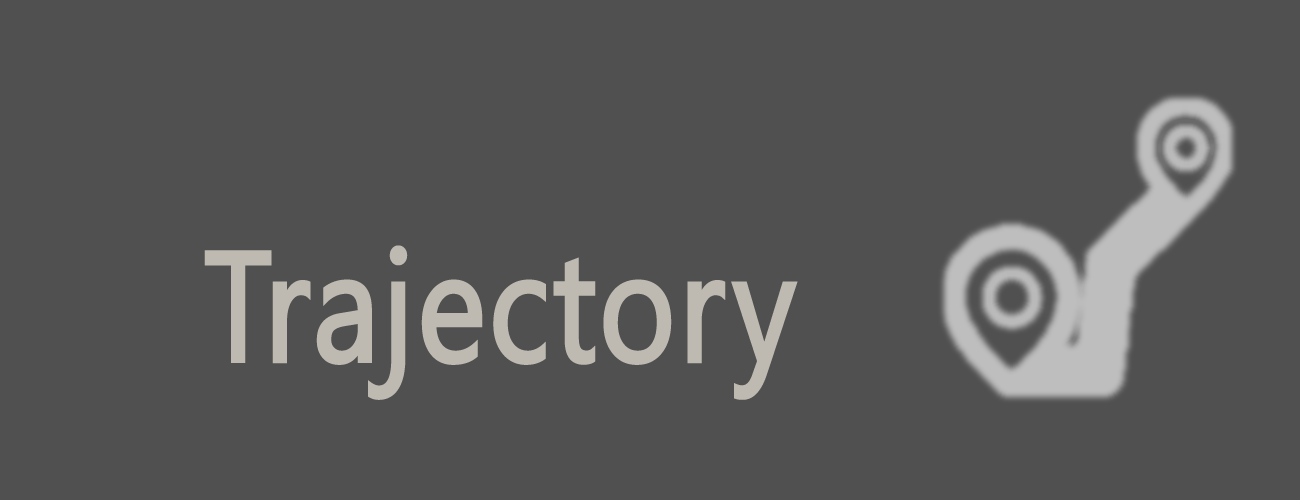
<style>
.page{position:relative;width:1300px;height:500px;background:#505050}
.page>*{position:absolute;margin:0}
.t1{font:156px "SegoeUI";color:#bebab1;font-weight:bold;scale:0.83 1}
</style>
<div class="page">
<p class="t1" style="left:204px;top:245px;width:594px;height:155px">Trajectory</p>
</div>
